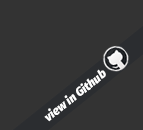
<style>
.page{position:relative;width:143px;height:130px;background:#333333}
.page>*{position:absolute;margin:0}
.t1{font:11.9px "FiraSans-BlackItalic";color:#ffffff}
</style>
<div class="page">
<p class="t1" style="left:44px;top:69px;width:62px;height:53px;rotate:-39deg">view in Github</p>
</div>
